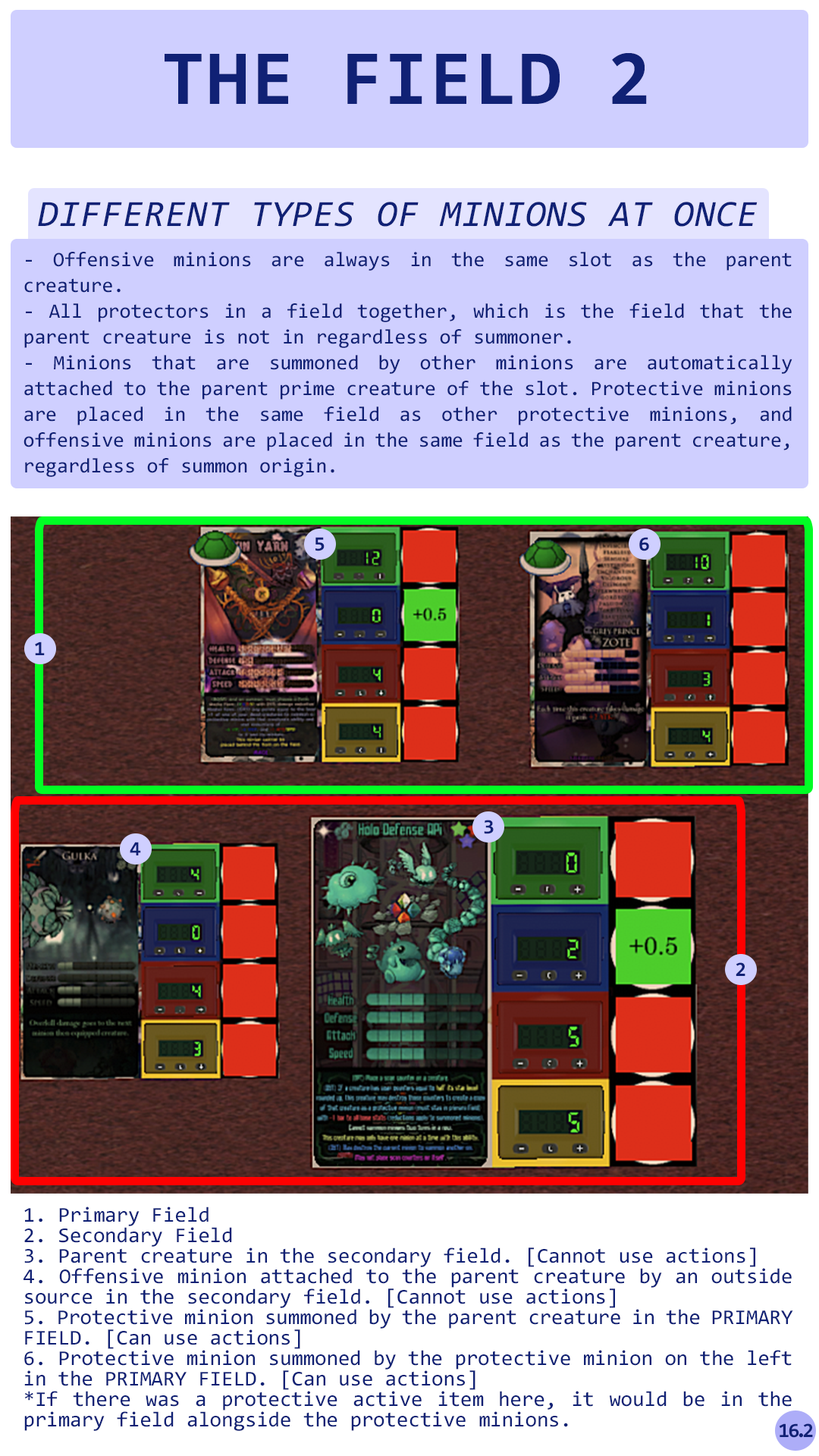
<style>
.page{position:relative;width:819px;height:1456px;background:#ffffff}
.page>*{position:absolute;margin:0}
.t1{font:78.3px "Consolas-Bold";letter-spacing:0.02em;color:#102175}
.t2{font:37.2px "Consolas-Italic";letter-spacing:0.02em;color:#102175}
.t3{font:20.5px/25.8px "Consolas";color:#102175}
.t4{font:20.5px "Consolas-Bold";color:#102175}
.t5{font:21.2px/20.5px "Consolas";color:#102175}
.t6{font:20.5px "Consolas-Bold";letter-spacing:-0.06em;color:#102175}
.t7{font:20.5px "Consolas-Bold";letter-spacing:-0.2em;color:#102175}
.t8{font:20.5px "Consolas-Bold";letter-spacing:-0.22em;color:#102175}
</style>
<div class="page">
<p class="t1" style="left:165px;top:53px;width:482px;height:51px">THE FIELD 2</p>
<p class="t2" style="left:38px;top:202px;width:720px;height:25px">DIFFERENT TYPES OF MINIONS AT ONCE</p>
<p class="t3" style="left:24px;top:252px;width:768px;height:225px;text-align:justify">- Offensive minions are always in the same slot as the parent creature.<br>- All protectors in a field together, which is the field that the parent creature is not in regardless of summoner.<br>- Minions that are summoned by other minions are automatically attached to the parent prime creature of the slot. Protective minions are placed in the same field as other protective minions, and offensive minions are placed in the same field as the parent creature, regardless of summon origin.</p>
<p class="t4" style="left:315px;top:537px;width:10px;height:14px">5</p>
<p class="t4" style="left:639px;top:537px;width:10px;height:14px">6</p>
<p class="t4" style="left:35px;top:642px;width:10px;height:13px">1</p>
<p class="t4" style="left:484px;top:820px;width:10px;height:14px">3</p>
<p class="t4" style="left:130px;top:842px;width:11px;height:13px">4</p>
<p class="t4" style="left:736px;top:962px;width:9px;height:14px">2</p>
<p class="t5" style="left:24px;top:1206px;width:769px;height:225px;text-align:justify">1. Primary Field<br>2. Secondary Field<br>3. Parent creature in the secondary field. [Cannot use actions]<br>4. Offensive minion attached to the parent creature by an outside source in the secondary field. [Cannot use actions]<br>5. Protective minion summoned by the parent creature in the PRIMARY FIELD. [Can use actions]<br>6. Protective minion summoned by the protective minion on the left in the PRIMARY FIELD. [Can use actions]<br>*If there was a protective active item here, it would be in the primary field alongside the protective minions.</p>
<p class="t6" style="left:779px;top:1423px;width:34px;height:15px">1<span class="t7">6</span><span class="t8">.</span>2</p>
</div>
